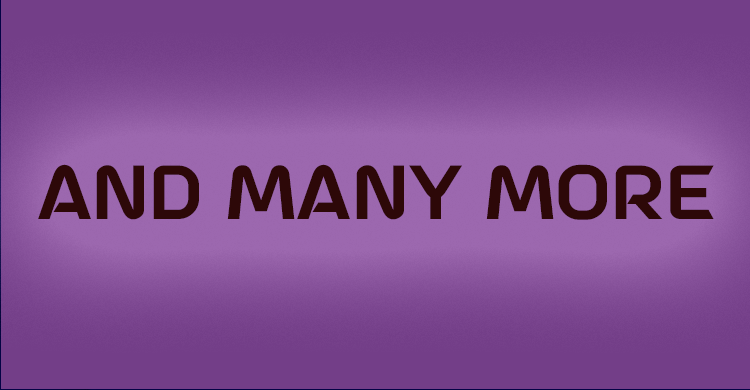
<style>
.page{position:relative;width:750px;height:390px;background:#733e88}
.page>*{position:absolute;margin:0}
.t1{font:72px "aAstroSpace";color:#2d0808}
</style>
<div class="page">
<p class="t1" style="left:38px;top:164px;width:676px;height:56px">And Many More</p>
</div>
